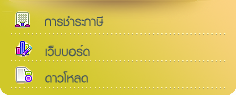
<style>
.page{position:relative;width:236px;height:95px}
.page>*{position:absolute;margin:0}
.t1{font:18px "KittithadaLight45F";color:#40515e}
</style>
<div class="page">
<p class="t1" style="left:45px;top:16px;width:59px;height:11px">การชำระภาษี</p>
<p class="t1" style="left:45px;top:45px;width:45px;height:12px">เว็บบอร์ด</p>
<p class="t1" style="left:45px;top:71px;width:43px;height:12px">ดาวโหลด</p>
</div>
